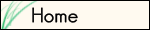
<style>
.page{position:relative;width:150px;height:30px;background:#fffaf0}
.page>*{position:absolute;margin:0}
.t1{font:20px "GeosansLight";color:#000000;font-weight:bold}
</style>
<div class="page">
<p class="t1" style="left:32px;top:7px;width:46px;height:16px">Home</p>
</div>
